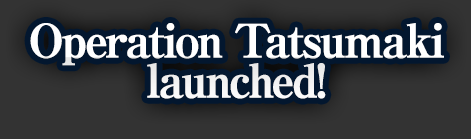
<style>
.page{position:relative;width:471px;height:139px;background:#333333}
.page>*{position:absolute;margin:0}
.t1{font:46px/40px "RyuminPro-ExBold";letter-spacing:-0.08em;color:#ffffff;font-weight:bold}
</style>
<div class="page">
<p class="t1" style="left:30px;top:23px;width:414px;height:76px;text-align:center">Operation Tatsumaki<br>launched!</p>
</div>
